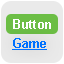
<style>
.page{position:relative;width:64px;height:64px;background:#eaeaea}
.page>*{position:absolute;margin:0}
.t1{font:12.5px "Arial-BoldMT";color:#ffffff}
.t2{font:12.5px "Arial-BoldMT";color:#0072ff}
</style>
<div class="page">
<p class="t1" style="left:13px;top:19px;width:38px;height:10px">Button</p>
<p class="t2" style="left:13px;top:38px;width:33px;height:10px">Game</p>
</div>
